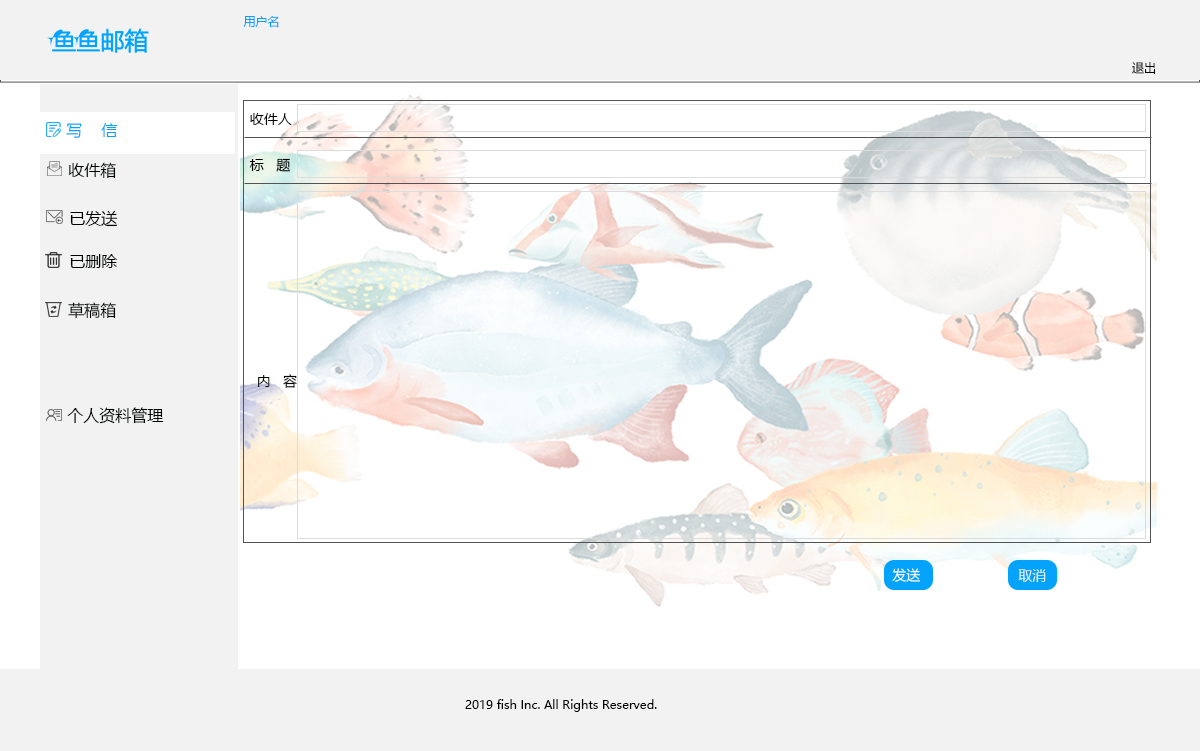
<style>
.page{position:relative;width:1200px;height:751px;background:#ffffff}
.page>*{position:absolute;margin:0}
.t1{font:12px "MicrosoftYaHei";color:#03a3fc}
.t2{font:12px "MicrosoftYaHei";color:#000000}
.t3{font:14px "MicrosoftYaHei";color:#000203}
.t4{font:16px "MicrosoftYaHei";color:#03a3fc}
.t5{font:14px "MicrosoftYaHei";color:#000101}
.t6{font:16px "MicrosoftYaHei";color:#000406}
.t7{font:16px "MicrosoftYaHei";color:#000102}
.t8{font:16px "MicrosoftYaHei";color:#000304}
.t9{font:16px "MicrosoftYaHei";color:#000203}
.t10{font:14px "MicrosoftYaHeiLight";color:#ffffff}
</style>
<div class="page">
<p class="t1" style="left:243px;top:16px;width:36px;height:12px">用户名</p>
<p class="t2" style="left:1132px;top:62px;width:23px;height:12px">退出</p>
<p class="t3" style="left:250px;top:113px;width:42px;height:12px">收件人</p>
<p class="t4" style="left:66px;top:123px;width:52px;height:15px">写    信</p>
<p class="t5" style="left:249px;top:158px;width:41px;height:14px">标   题</p>
<p class="t6" style="left:68px;top:162px;width:48px;height:17px">收件箱</p>
<p class="t7" style="left:70px;top:210px;width:48px;height:17px">已发送</p>
<p class="t8" style="left:70px;top:254px;width:48px;height:14px">已删除</p>
<p class="t9" style="left:68px;top:302px;width:48px;height:17px">草稿箱</p>
<p class="t5" style="left:258px;top:374px;width:39px;height:14px">内   容</p>
<p class="t8" style="left:67px;top:407px;width:97px;height:17px">个人资料管理</p>
<p class="t10" style="left:892px;top:568px;width:28px;height:14px">发送</p>
<p class="t10" style="left:1018px;top:569px;width:28px;height:13px">取消</p>
<p class="t2" style="left:465px;top:699px;width:192px;height:13px">2019 fish Inc. All Rights Reserved.</p>
</div>
